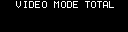
<style>
.page{position:relative;width:128px;height:32px;background:#000000}
.page>*{position:absolute;margin:0}
.t1{font:10px "Terminal";letter-spacing:-0.1em;color:#ffffff}
</style>
<div class="page">
<p class="t1" style="left:16px;top:1px;width:62px;height:7px">VIDEO MODE</p>
</div>
